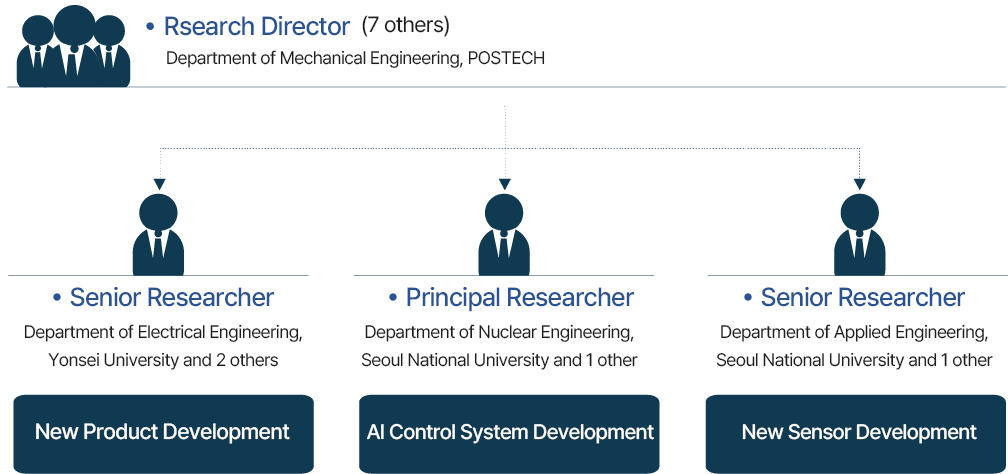
<style>
.page{position:relative;width:1008px;height:474px;background:#ffffff}
.page>*{position:absolute;margin:0}
.t1{font:26px "PretendardVariable-Medium";letter-spacing:-0.029em;color:#2a5393}
.t2{font:22px "PretendardVariable-Regular";letter-spacing:-0.029em;color:#1e1e1e}
.t3{font:18px "PretendardVariable-Regular";letter-spacing:-0.029em;color:#1e1e1e}
.t4{font:18px/28px "PretendardVariable-Regular";letter-spacing:-0.029em;color:#1e1e1e}
.t5{font:22px "PretendardVariable-Medium";letter-spacing:-0.029em;color:#ffffff}
.t6{font:21px "PretendardVariable-Medium";letter-spacing:-0.029em;color:#ffffff}
</style>
<div class="page">
<p class="t1" style="left:165px;top:16px;width:185px;height:20px">Rsearch Director</p>
<p class="t2" style="left:362px;top:15px;width:87px;height:22px">(7 others)</p>
<p class="t3" style="left:167px;top:50px;width:378px;height:18px">Department of Mechanical Engineering, POSTECH</p>
<p class="t1" style="left:70px;top:287px;width:204px;height:20px">Senior Researcher</p>
<p class="t1" style="left:407px;top:287px;width:227px;height:25px">Principal Researcher</p>
<p class="t1" style="left:761px;top:287px;width:204px;height:20px">Senior Researcher</p>
<p class="t4" style="left:24px;top:324px;width:278px;height:46px;text-align:center">Department of Electrical Engineering,<br>Yonsei University and 2 others</p>
<p class="t4" style="left:362px;top:324px;width:276px;height:46px;text-align:center">Department of Nuclear Engineering,<br>Seoul National University and 1 other</p>
<p class="t4" style="left:717px;top:324px;width:276px;height:46px;text-align:center">Department of Applied Engineering,<br>Seoul National University and 1 other</p>
<p class="t5" style="left:36px;top:423px;width:254px;height:21px">New Product Development</p>
<p class="t6" style="left:367px;top:423px;width:287px;height:21px">AI Control System Development</p>
<p class="t6" style="left:742px;top:423px;width:235px;height:21px">New Sensor Development</p>
</div>
